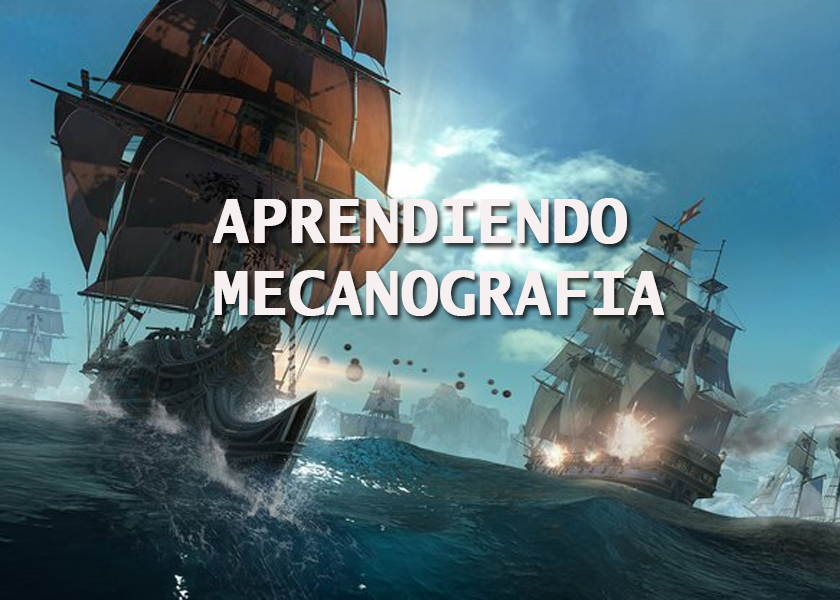
<style>
.page{position:relative;width:840px;height:600px}
.page>*{position:absolute;margin:0}
.t1{font:60px "LucidaSans-TypewriterBold";color:#f6f0f0;font-weight:bold}
</style>
<div class="page">
<p class="t1" style="left:212px;top:198px;width:452px;height:118px">APRENDIENDO<br>MECANOGRAFIA</p>
</div>
